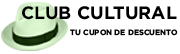
<style>
.page{position:relative;width:180px;height:54px;background:#ffffff}
.page>*{position:absolute;margin:0}
.t1{font:18px "Gotham-Bold";color:#000000;text-transform:uppercase}
.t2{font:7.6px "Gotham-Bold";color:#000000;text-transform:uppercase}
</style>
<div class="page">
<p class="t1" style="left:22px;top:6px;width:155px;height:14px">CLUB CULTURAL</p>
<p class="t2" style="left:70px;top:29px;width:108px;height:7px">tu cupon de descuento</p>
</div>
